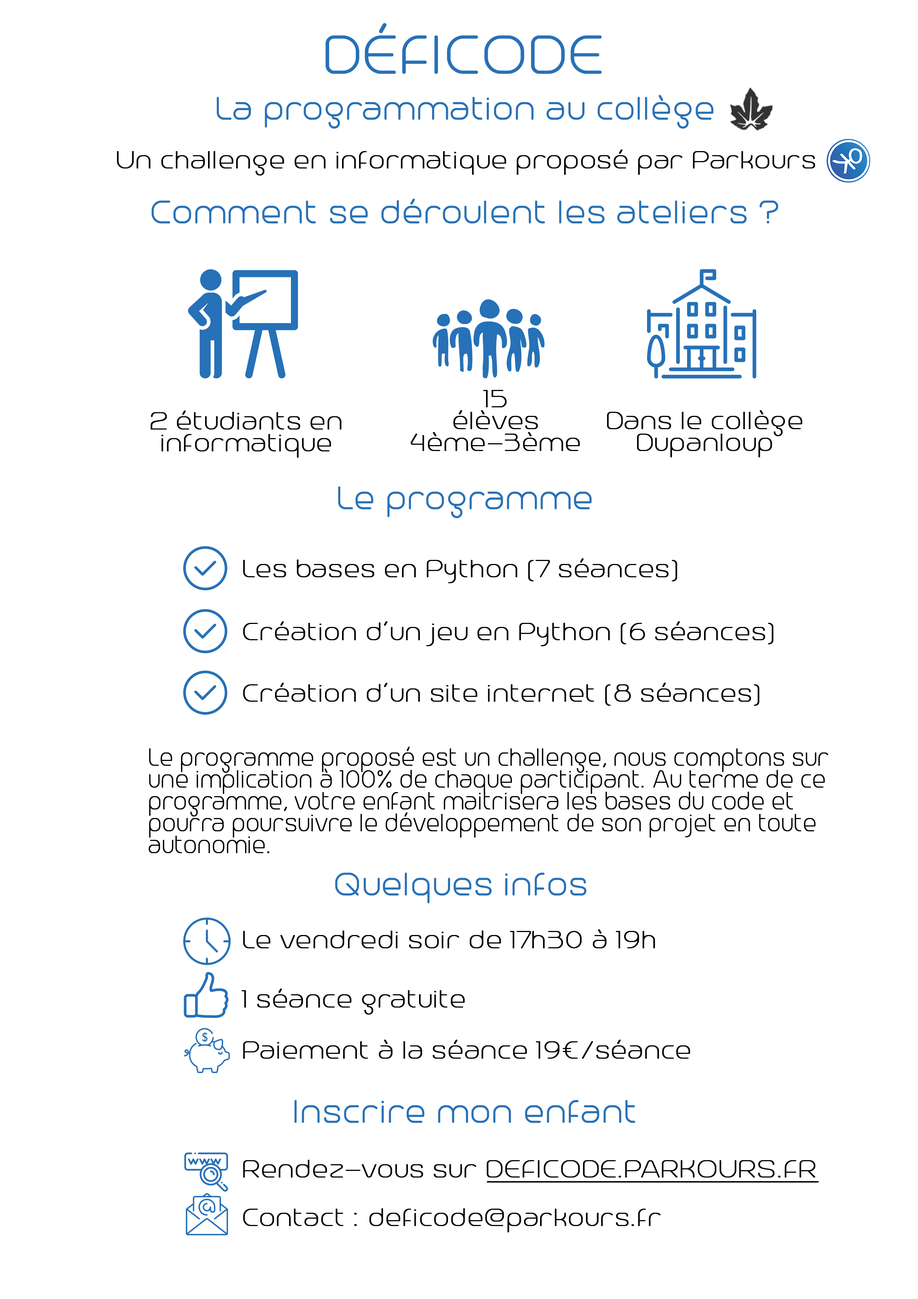
<style>
.page{position:relative;width:918px;height:1299px;background:#ffffff}
.page>*{position:absolute;margin:0}
.t1{font:65.6px "Trench-Thin";color:#2671b7;text-transform:uppercase;font-weight:bold}
.t2{font:39.4px "Trench-Thin";color:#2671b7;font-weight:bold}
.t3{font:30.6px "Trench-Thin";color:#000000;font-weight:bold}
.t4{font:30.6px/21.9px "Trench-Thin";color:#000000;font-weight:bold}
.t5{font:30.6px/21.9px "Trench-Thin";color:#000000;font-weight:bold;scale:0.83 1}
.t6{font:30.6px "Trench-Thin";color:#000000;text-transform:uppercase;font-weight:bold;text-decoration:underline}
</style>
<div class="page">
<p class="t1" style="left:325px;top:23px;width:277px;height:51px">DÉfICODE</p>
<p class="t2" style="left:217px;top:95px;width:497px;height:34px">La programmation au collège</p>
<p class="t3" style="left:117px;top:149px;width:698px;height:26px">Un challenge en informatique proposé par Parkours</p>
<p class="t2" style="left:151px;top:198px;width:628px;height:26px">Comment se déroulent les ateliers ?</p>
<p class="t4" style="left:411px;top:390px;width:169px;height:61px;text-align:center">15 <br>élèves<br>4ème-3ème</p>
<p class="t3" style="left:151px;top:410px;width:191px;height:48px">2 étudiants en informatique</p>
<p class="t3" style="left:607px;top:410px;width:196px;height:47px">Dans le collège Dupanloup</p>
<p class="t2" style="left:338px;top:486px;width:254px;height:32px">Le programme</p>
<p class="t3" style="left:243px;top:558px;width:435px;height:25px">Les bases en Python (7 séances)</p>
<p class="t3" style="left:243px;top:621px;width:531px;height:25px">Création d’un jeu en Python (6 séances)</p>
<p class="t3" style="left:243px;top:682px;width:517px;height:24px">Création d’un site internet (8 séances)</p>
<p class="t5" style="left:148px;top:746px;width:681px;height:107px">Le programme proposé est un challenge, nous comptons sur une implication à 100% de chaque participant. Au terme de ce programme, votre enfant maitrisera les bases du code et<br>pourra poursuivre le développement de son projet en toute<br>autonomie.</p>
<p class="t2" style="left:335px;top:872px;width:252px;height:31px">Quelques infos</p>
<p class="t3" style="left:243px;top:929px;width:412px;height:19px">Le vendredi soir de 17h30 à 19h</p>
<p class="t3" style="left:241px;top:988px;width:224px;height:26px">1 séance gratuite</p>
<p class="t3" style="left:243px;top:1039px;width:447px;height:19px">Paiement à la séance 19€/séance</p>
<p class="t2" style="left:294px;top:1100px;width:341px;height:23px">Inscrire mon enfant</p>
<p class="t6" style="left:243px;top:1160px;width:576px;height:22px"><span class="t3">Rendez-vous sur </span>deficode.parkours.fr</p>
<p class="t3" style="left:243px;top:1208px;width:418px;height:24px">Contact : deficode@parkours.fr</p>
</div>
